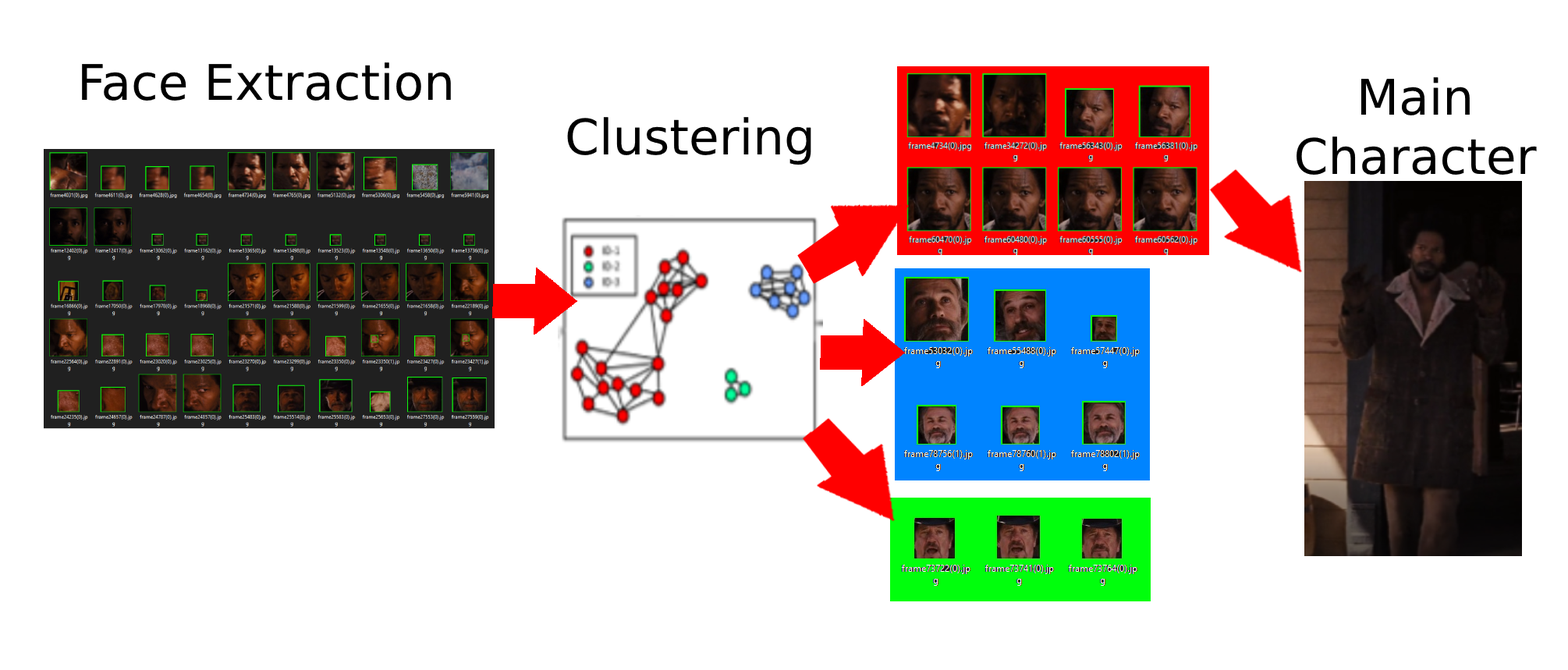
<style>
.page{position:relative;width:1568px;height:670px;background:#ffffff}
.page>*{position:absolute;margin:0}
.t1{font:49.1px "DejaVuSans";color:#000000}
</style>
<div class="page">
<p class="t1" style="left:82px;top:62px;width:369px;height:39px">Face Extraction</p>
<p class="t1" style="left:1297px;top:77px;width:240px;height:98px;text-align:center">Main<br>Character</p>
<p class="t1" style="left:567px;top:117px;width:244px;height:48px">Clustering</p>
</div>
